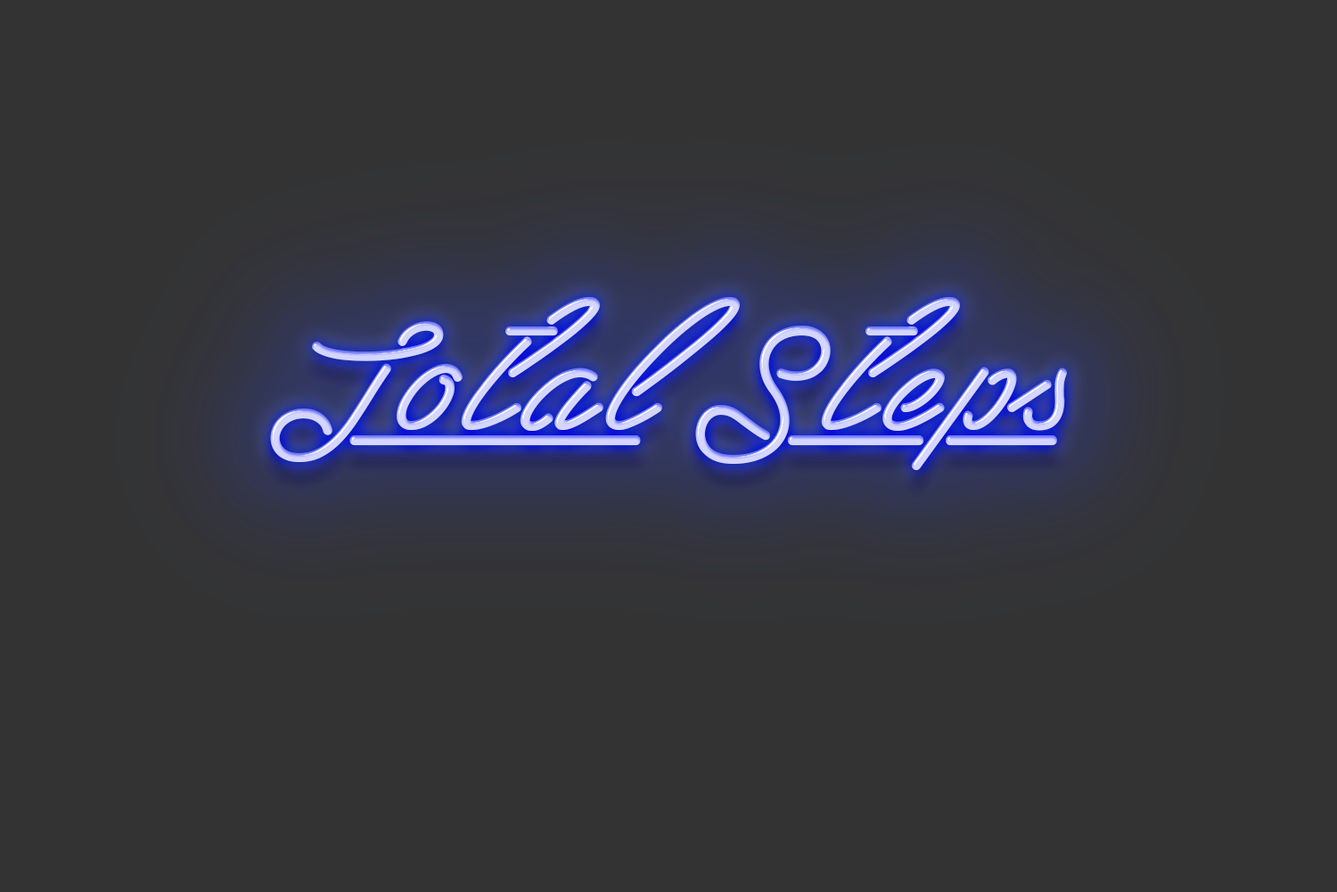
<style>
.page{position:relative;width:1337px;height:892px;background:#333333}
.page>*{position:absolute;margin:0}
.t1{font:177.7px "LasEnterPersonalUseOnly"}
</style>
<div class="page">
<p class="t1" style="left:270px;top:297px;width:797px;height:173px">Total Steps</p>
</div>
